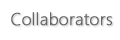
<style>
.page{position:relative;width:120px;height:40px;background:#ffffff}
.page>*{position:absolute;margin:0}
.t1{font:16px "MicrosoftYaHeiLight";color:#646464;font-weight:bold}
</style>
<div class="page">
<p class="t1" style="left:11px;top:12px;width:101px;height:14px">Collaborators</p>
</div>
